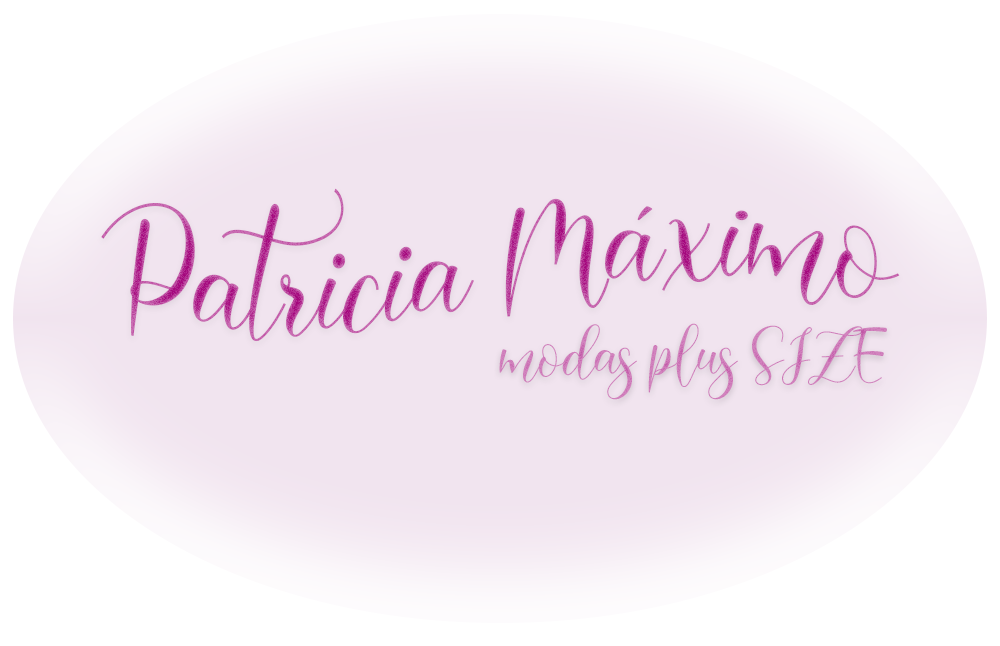
<style>
.page{position:relative;width:1000px;height:646px;background:#ffffff}
.page>*{position:absolute;margin:0}
.t1{font:150px "Harelia"}
.t2{font:66.7px "Harelia";color:#d07fbc}
</style>
<div class="page">
<p class="t1" style="left:101px;top:188px;width:799px;height:154px">Patricia Máximo</p>
<p class="t2" style="left:499px;top:323px;width:388px;height:77px">modas plus SIZE</p>
</div>
